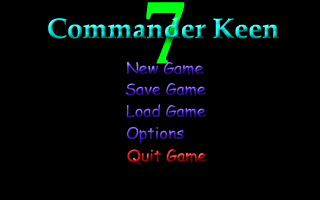
<style>
.page{position:relative;width:320px;height:200px;background:#000000}
.page>*{position:absolute;margin:0}
.t1{font:96px "Garamond-Bold";color:#00ff12}
.t2{font:28px "PalatinoLinotype-Bold"}
.t3{font:16px "ComicSansMS"}
</style>
<div class="page">
<p class="t1" style="left:146px;top:2px;width:39px;height:62px">7</p>
<p class="t2" style="left:48px;top:17px;width:231px;height:22px">Commander Keen</p>
<p class="t3" style="left:127px;top:62px;width:77px;height:13px">New Game</p>
<p class="t3" style="left:126px;top:83px;width:80px;height:13px">Save Game</p>
<p class="t3" style="left:126px;top:104px;width:80px;height:14px">Load Game</p>
<p class="t3" style="left:127px;top:127px;width:57px;height:17px">Options</p>
<p class="t3" style="left:127px;top:149px;width:80px;height:16px">Quit Game</p>
</div>
